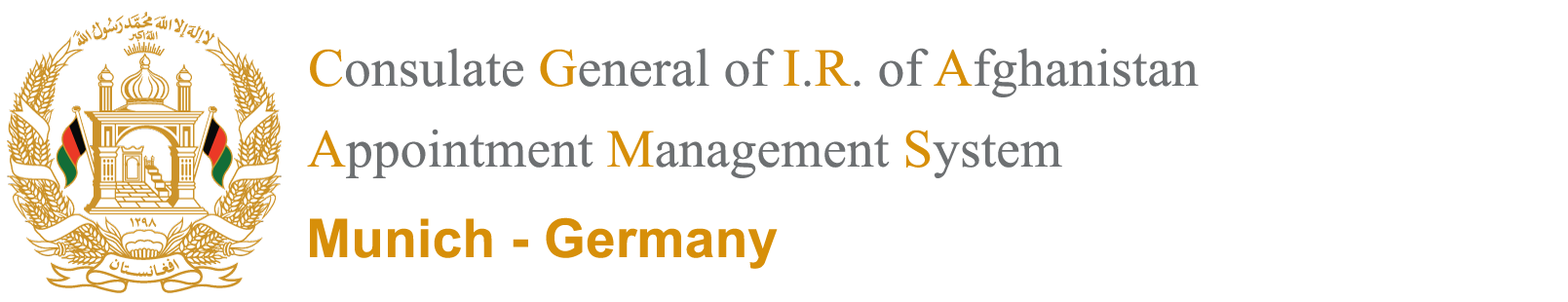
<style>
.page{position:relative;width:1568px;height:302px;background:#ffffff}
.page>*{position:absolute;margin:0}
.t1{font:53.6px "TimesNewRomanPSMT";letter-spacing:0.005em;color:#6d7072}
.t2{font:53.6px "TimesNewRomanPSMT";letter-spacing:0.005em;color:#d78f09}
</style>
<div class="page">
<p class="t1" style="left:310px;top:48px;width:889px;height:49px"><span class="t2">C</span>onsulate <span class="t2">G</span>eneral of <span class="t2">I</span>.<span class="t2">R</span>. of <span class="t2">A</span>fghanistan</p>
<p class="t1" style="left:307px;top:129px;width:755px;height:49px"><span class="t2">A</span>ppointment <span class="t2">M</span>anagement <span class="t2">S</span>ystem</p>
</div>
